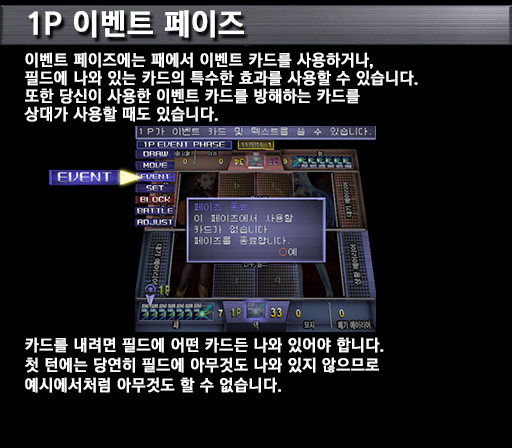
<style>
.page{position:relative;width:512px;height:448px;background:#000000}
.page>*{position:absolute;margin:0}
.t1{font:30px "KoreanGD15-R";color:#ffffff;font-weight:bold}
.t2{font:16px/18px "KoreanGD15-R";color:#ffffff;font-weight:bold}
.t3{font:16px/20px "KoreanGD15-R";color:#ffffff;font-weight:bold}
</style>
<div class="page">
<p class="t1" style="left:28px;top:10px;width:216px;height:28px">1P 이벤트 페이즈</p>
<p class="t2" style="left:24px;top:52px;width:394px;height:70px">이벤트 페이즈에는 패에서 이벤트 카드를 사용하거나,<br>필드에 나와 있는 카드의 특수한 효과를 사용할 수 있습니다.<br>또한 당신이 사용한 이벤트 카드를 방해하는 카드를<br>상대가 사용할 때도 있습니다.</p>
<p class="t3" style="left:25px;top:337px;width:359px;height:56px">카드를 내려면 필드에 어떤 카드든 나와 있어야 합니다.<br>첫 턴에는 당연히 필드에 아무것도 나와 있지 않으므로<br>예시에서처럼 아무것도 할 수 없습니다.</p>
</div>
